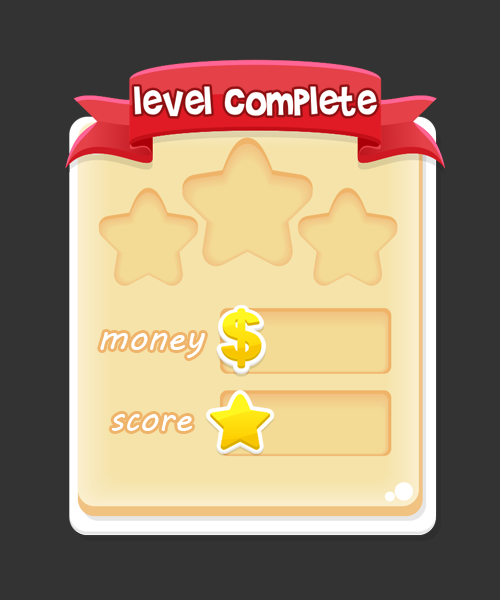
<style>
.page{position:relative;width:500px;height:600px;background:#333333}
.page>*{position:absolute;margin:0}
.t1{font:36px "MVBoli";color:#ffffff}
</style>
<div class="page">
<p class="t1" style="left:100px;top:332px;width:105px;height:26px">money</p>
<p class="t1" style="left:111px;top:414px;width:81px;height:17px">score</p>
</div>
